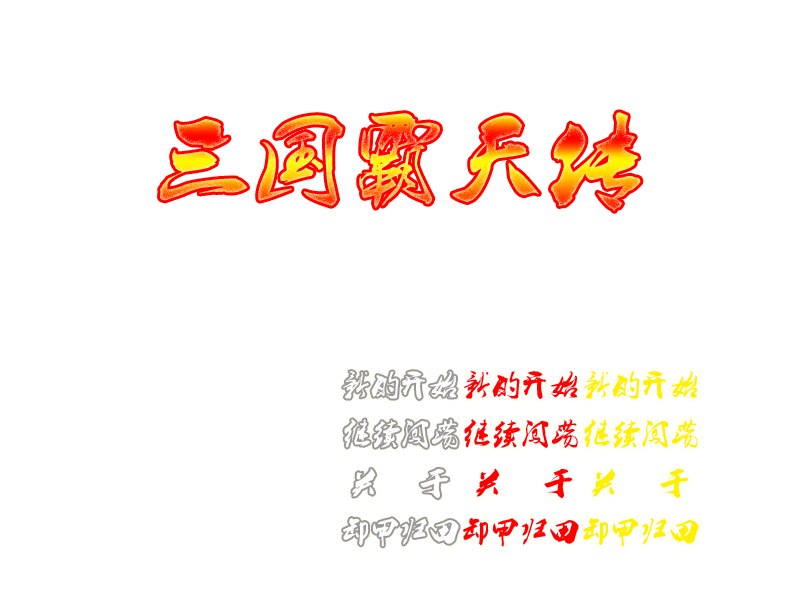
<style>
.page{position:relative;width:800px;height:600px;background:#ffffff}
.page>*{position:absolute;margin:0}
.t1{font:100px "-"}
.t2{font:30px "-";color:#ffffff}
.t3{font:30px "-";color:#ff0000}
.t4{font:30px "-";color:#fff001}
</style>
<div class="page">
<p class="t1" style="left:160px;top:112px;width:481px;height:99px">三国霸天传</p>
<p class="t2" style="left:343px;top:371px;width:114px;height:28px">新的开始</p>
<p class="t3" style="left:464px;top:371px;width:114px;height:28px">新的开始</p>
<p class="t4" style="left:584px;top:371px;width:114px;height:28px">新的开始</p>
<p class="t2" style="left:344px;top:419px;width:114px;height:29px">继续闯荡</p>
<p class="t3" style="left:464px;top:419px;width:114px;height:29px">继续闯荡</p>
<p class="t4" style="left:584px;top:419px;width:114px;height:29px">继续闯荡</p>
<p class="t3" style="left:476px;top:468px;width:97px;height:31px">关    于</p>
<p class="t4" style="left:592px;top:468px;width:97px;height:31px">关    于</p>
<p class="t2" style="left:343px;top:518px;width:116px;height:29px">卸甲归田</p>
<p class="t3" style="left:463px;top:518px;width:116px;height:29px">卸甲归田</p>
<p class="t4" style="left:583px;top:518px;width:116px;height:29px">卸甲归田</p>
</div>
